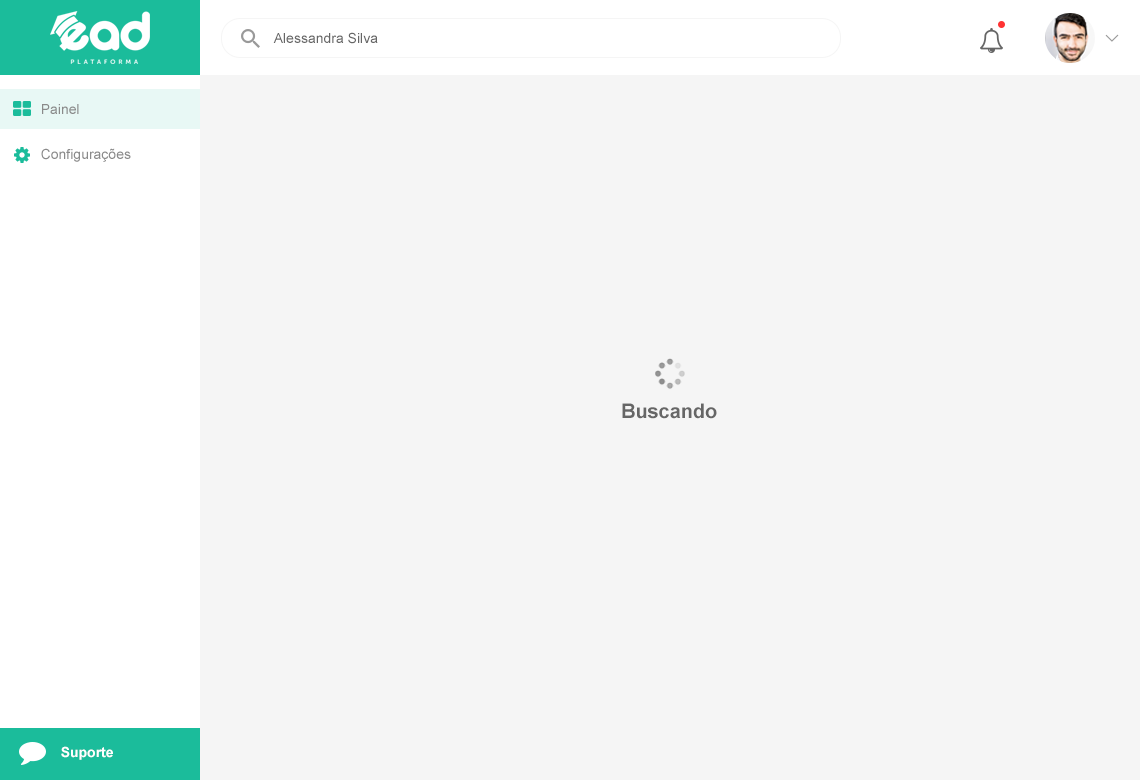
<style>
.page{position:relative;width:1140px;height:780px;background:#f5f5f5}
.page>*{position:absolute;margin:0}
.t1{font:14px "ArialMT";color:#666666}
.t2{font:14px "ArialMT";color:#8a8a8a}
.t3{font:20px "Arial-BoldMT";color:#666666}
.t4{font:14px "Arial-BoldMT";color:#ffffff}
</style>
<div class="page">
<p class="t1" style="left:273px;top:32px;width:105px;height:12px">Alessandra Silva</p>
<p class="t2" style="left:42px;top:104px;width:37px;height:10px">Painel</p>
<p class="t2" style="left:41px;top:148px;width:90px;height:14px">Configurações</p>
<p class="t3" style="left:622px;top:403px;width:95px;height:16px">Buscando</p>
<p class="t4" style="left:61px;top:746px;width:52px;height:14px">Suporte</p>
</div>
